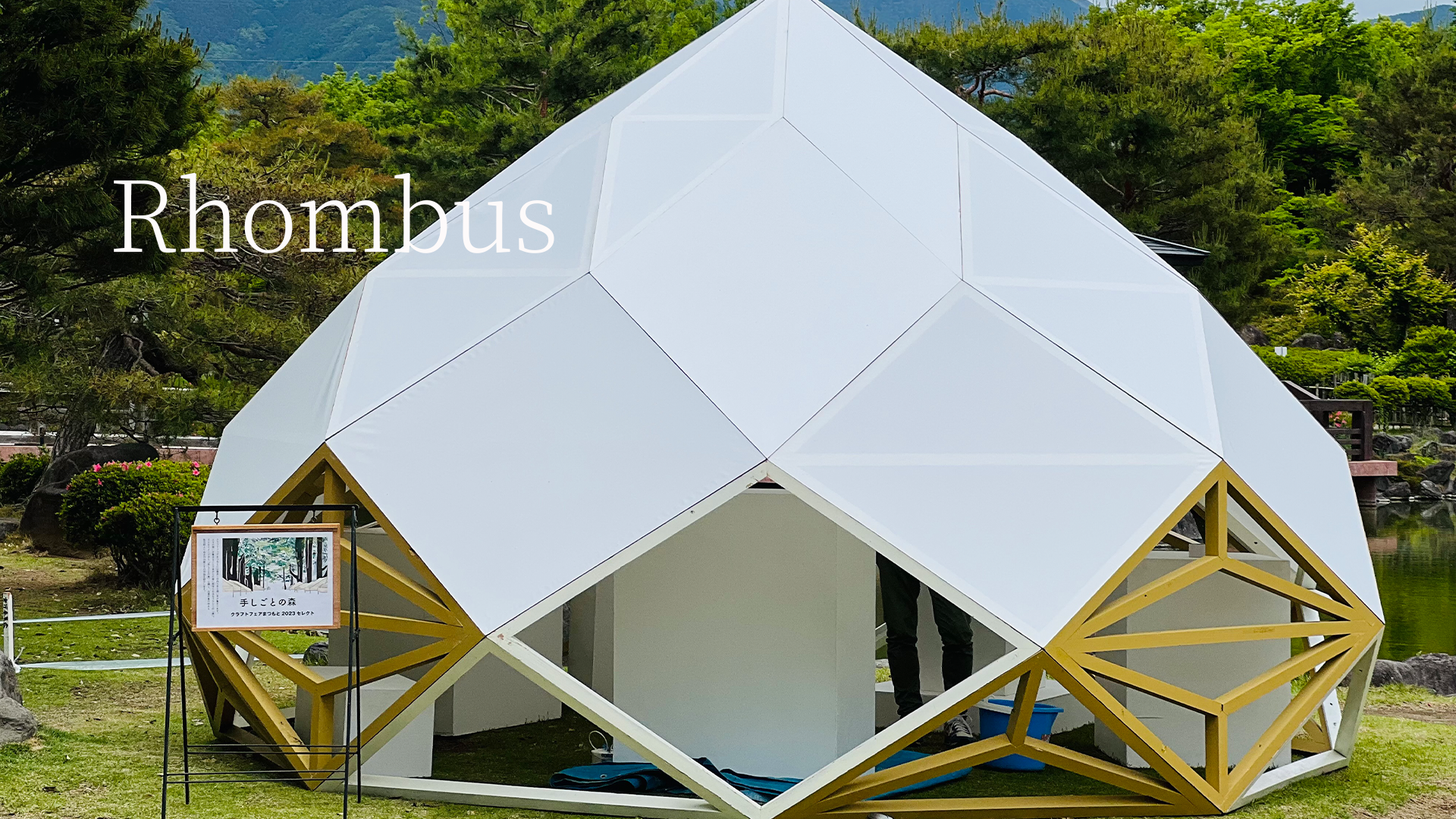
<style>
.page{position:relative;width:1456px;height:819px}
.page>*{position:absolute;margin:0}
.t1{font:98.6px "NotoSerifJP-ExtraLight";letter-spacing:-0.01em;color:#fdfafa}
</style>
<div class="page">
<p class="t1" style="left:114px;top:173px;width:440px;height:80px">Rhombus</p>
</div>
